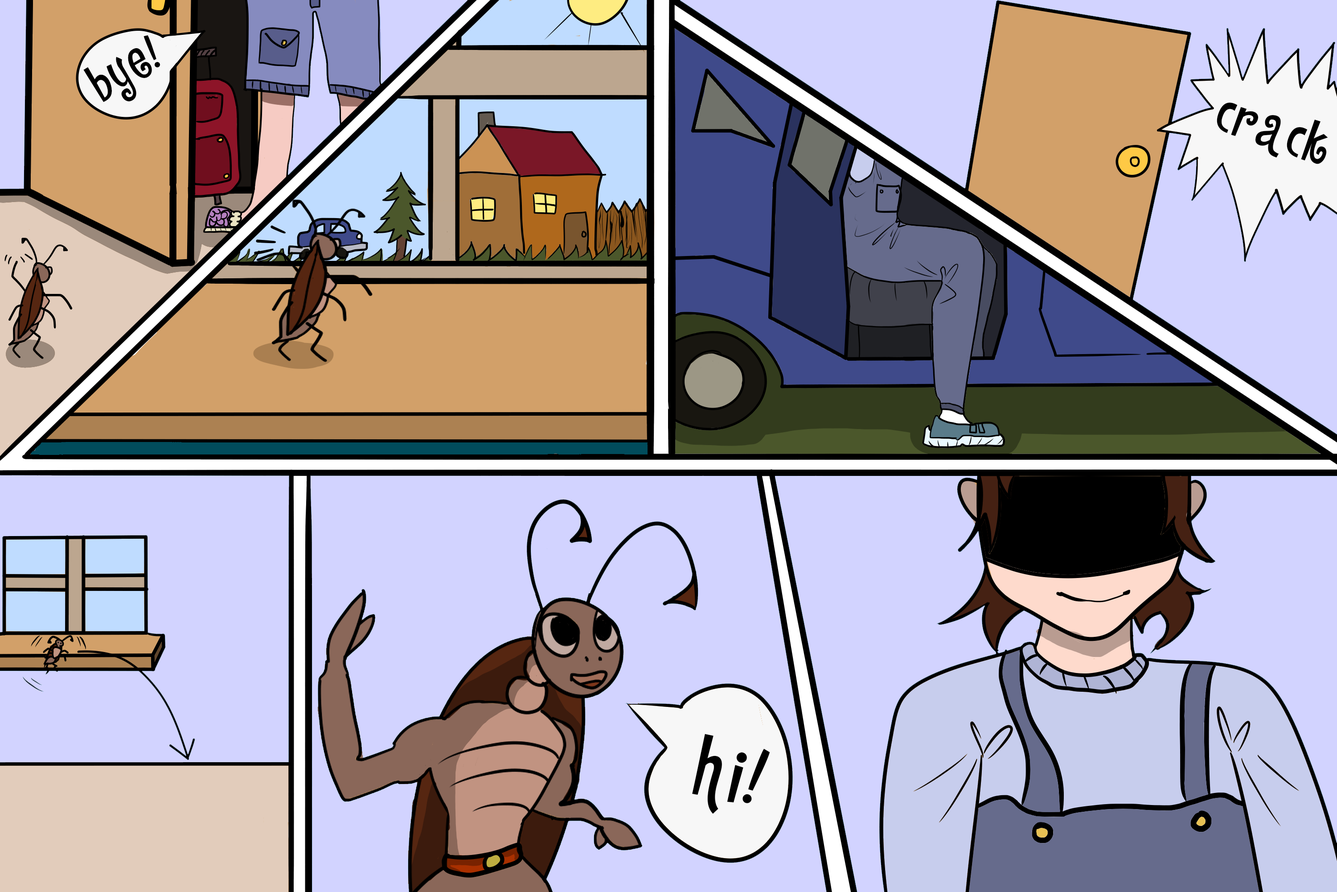
<style>
.page{position:relative;width:1337px;height:892px;background:#d2d3ff}
.page>*{position:absolute;margin:0}
.t1{font:47.9px "mr_CountryhouseG";color:#000000}
.t2{font:53.9px "mr_CountryhouseG";color:#000000}
.t3{font:79.6px "mr_CountryhouseG";color:#000000}
</style>
<div class="page">
<p class="t1" style="left:83px;top:35px;width:77px;height:67px;rotate:-30deg">bye!</p>
<p class="t2" style="left:1217px;top:103px;width:111px;height:61px;rotate:19deg">crack</p>
<p class="t3" style="left:692px;top:733px;width:78px;height:81px;rotate:13deg">hi!</p>
</div>
